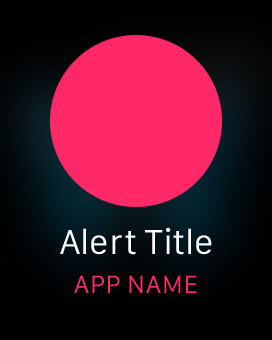
<style>
.page{position:relative;width:272px;height:340px;background:#ff2968}
.page>*{position:absolute;margin:0}
.t1{font:36px "SanFranciscoText-Regular";letter-spacing:-0.008em;color:#ffffff}
.t2{font:26px "SanFranciscoText-Regular";letter-spacing:0.016em;color:#ff2968;text-transform:uppercase}
</style>
<div class="page">
<p class="t1" style="left:60px;top:227px;width:152px;height:28px">Alert Title</p>
<p class="t2" style="left:74px;top:275px;width:123px;height:18px">App Name</p>
</div>
